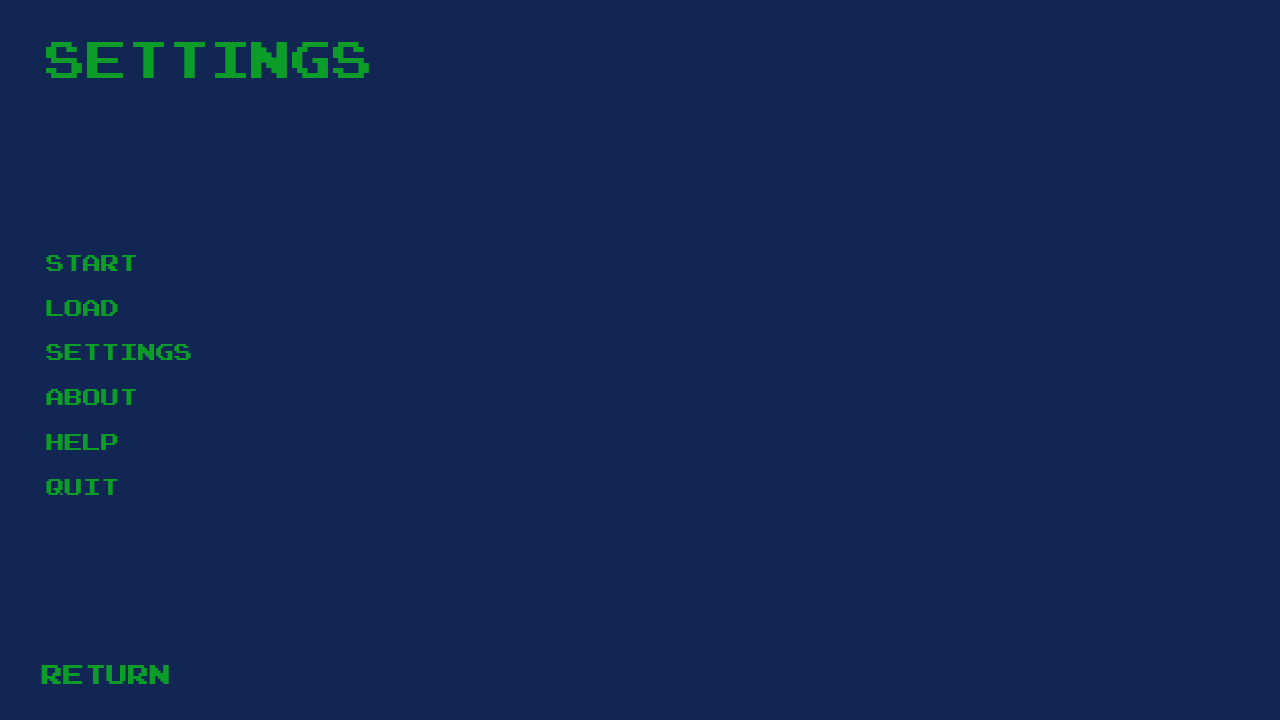
<style>
.page{position:relative;width:1280px;height:720px;background:#112652}
.page>*{position:absolute;margin:0}
.t1{font:41.8px "ArcadeNormal";color:#0c9d28}
.t2{font:18.7px "ArcadeNormal";color:#0c9d28}
.t3{font:22px "ArcadeNormal";color:#0c9d28}
</style>
<div class="page">
<p class="t1" style="left:46px;top:42px;width:323px;height:36px">SETTINGS</p>
<p class="t2" style="left:46px;top:255px;width:145px;height:240px">Start<br><br>load<br><br>Settings<br><br>about<br><br>help<br><br>quit</p>
<p class="t3" style="left:41px;top:665px;width:128px;height:19px">RETURN</p>
</div>
